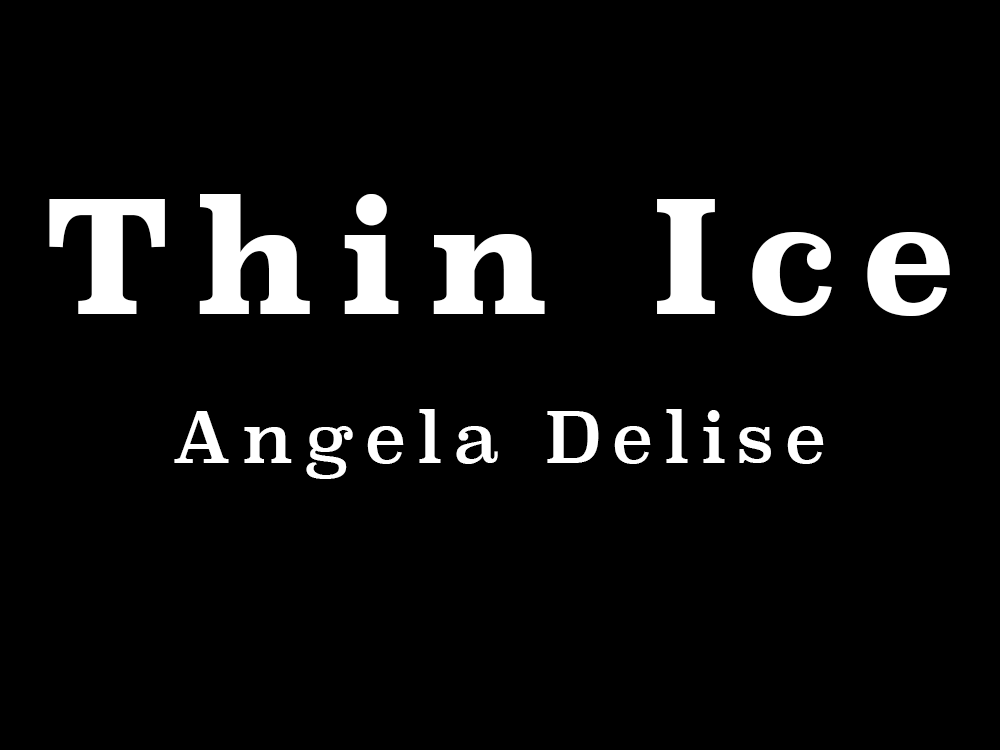
<style>
.page{position:relative;width:1000px;height:750px;background:#000000}
.page>*{position:absolute;margin:0}
.t1{font:155.4px "Superclarendon-Bold";letter-spacing:0.16em;color:#ffffff;scale:0.97 1}
.t2{font:69.6px "Superclarendon-Regular";letter-spacing:0.16em;color:#ffffff;scale:0.97 1}
</style>
<div class="page">
<p class="t1" style="left:49px;top:194px;width:901px;height:122px">Thin Ice</p>
<p class="t2" style="left:174px;top:409px;width:650px;height:70px">Angela Delise</p>
</div>
